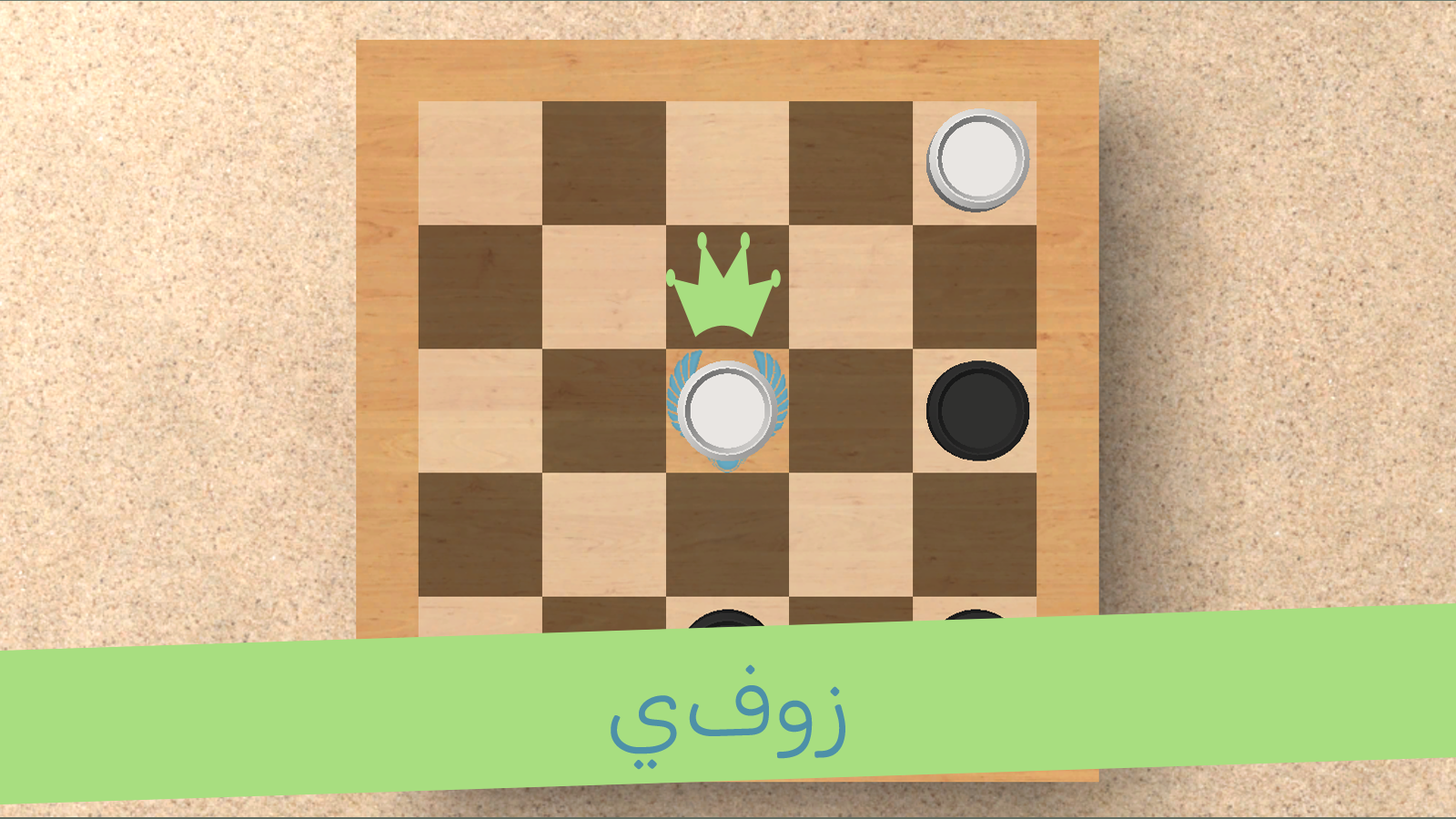
<style>
.page{position:relative;width:1456px;height:819px}
.page>*{position:absolute;margin:0}
.t1{font:98.3px "Rubik-Light";color:#4d90a8}
</style>
<div class="page">
<p class="t1" style="left:611px;top:664px;width:234px;height:106px;rotate:-2deg">يفوز</p>
</div>
